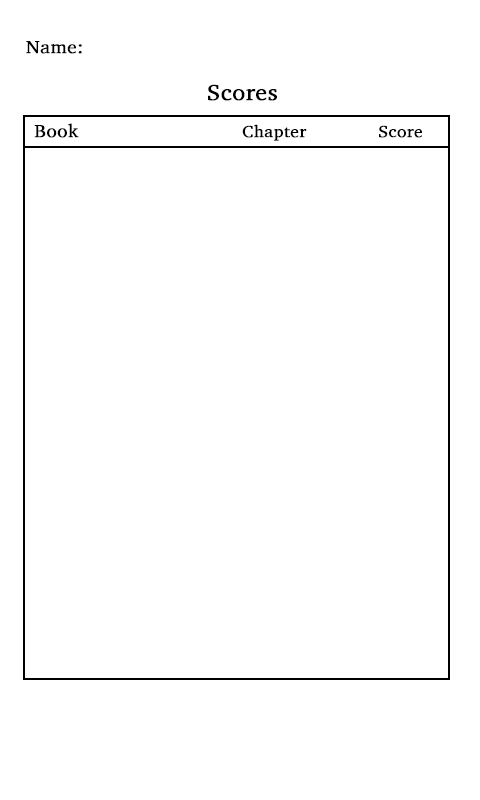
<style>
.page{position:relative;width:480px;height:800px;background:#ffffff}
.page>*{position:absolute;margin:0}
.t1{font:18px "Charter";color:#000000;font-weight:bold;scale:1.07 1}
.t2{font:22.5px "Charter";color:#000000;font-weight:bold;scale:1.07 1}
.t3{font:16.5px "Charter";color:#000000;font-weight:bold;scale:1.07 1}
</style>
<div class="page">
<p class="t1" style="left:26px;top:41px;width:56px;height:13px">Name:</p>
<p class="t2" style="left:208px;top:84px;width:69px;height:17px">Scores</p>
<p class="t1" style="left:34px;top:123px;width:45px;height:15px">Book</p>
<p class="t3" style="left:242px;top:124px;width:65px;height:17px">Chapter</p>
<p class="t3" style="left:379px;top:125px;width:43px;height:13px">Score</p>
</div>
